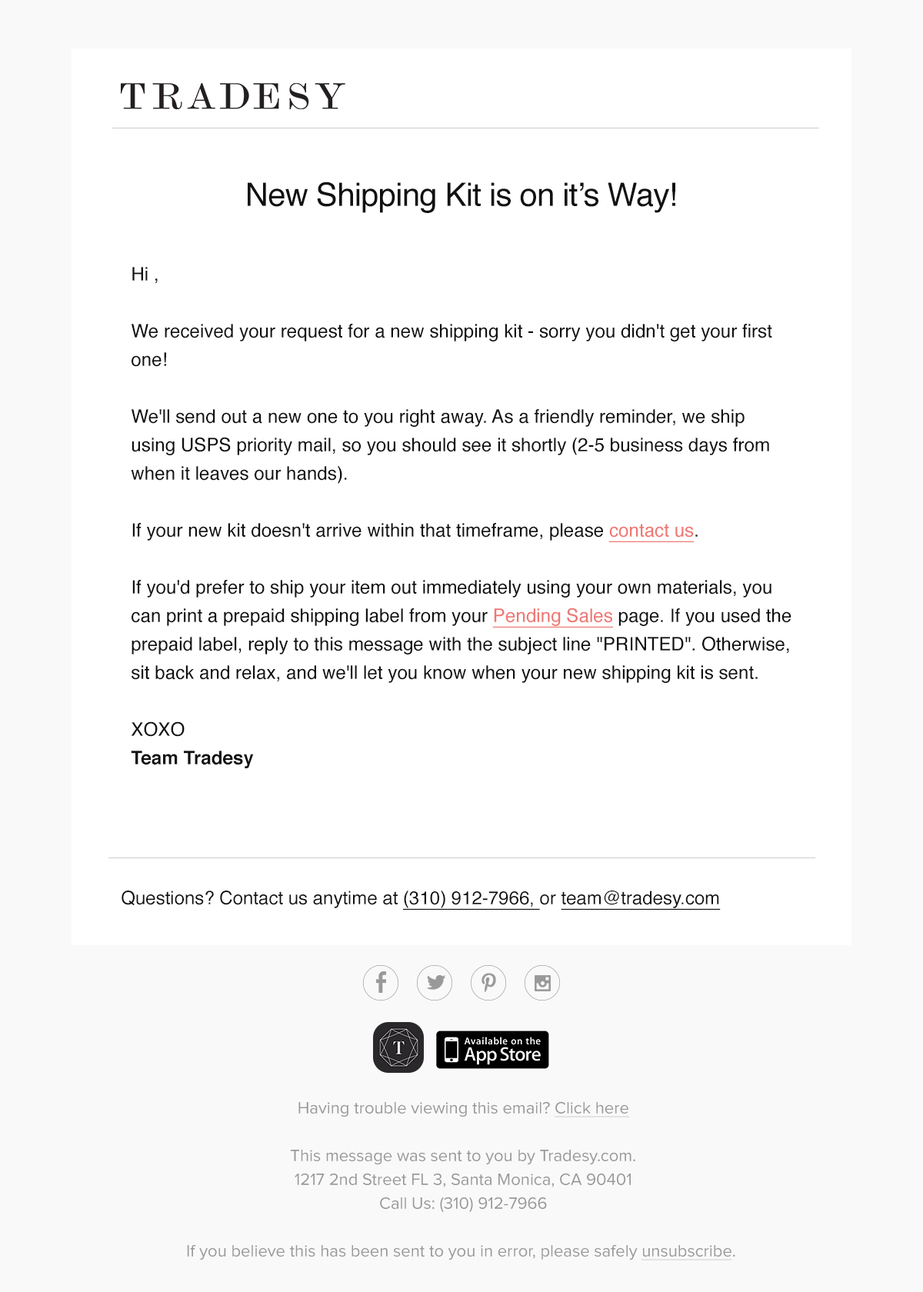
<style>
.page{position:relative;width:923px;height:1292px;background:#ffffff}
.page>*{position:absolute;margin:0}
.t1{font:32.3px "Helvetica";letter-spacing:-0.02em;color:#111111}
.t2{font:18.6px/28.5px "Helvetica";color:#111111}
.t3{font:18.6px/28.5px "Helvetica";color:#ee7873;text-decoration:underline}
.t4{font:18.6px/28.5px "Helvetica-Bold";color:#111111}
.t5{font:18.5px "Helvetica";color:#111111}
.t6{font:18.5px "Helvetica";color:#111111;text-decoration:underline}
.t7{font:16.9px/23.8px "ProximaNova-Regular";color:#999999}
.t8{font:16.9px/23.8px "ProximaNova-Regular";color:#999999;text-decoration:underline}
</style>
<div class="page">
<p class="t1" style="left:248px;top:182px;width:427px;height:31px">New Shipping Kit is on it’s Way!</p>
<p class="t2" style="left:131px;top:267px;width:660px;height:501px">Hi ,<br><br>We received your request for a new shipping kit - sorry you didn't get your first one!<br><br>We'll send out a new one to you right away. As a friendly reminder, we ship using USPS priority mail, so you should see it shortly (2-5 business days from when it leaves our hands).<br><br>If your new kit doesn't arrive within that timeframe, please <span class="t3">contact us</span>.<br><br>If you'd prefer to ship your item out immediately using your own materials, you can print a prepaid shipping label from your <span class="t3">Pending Sales</span> page. If you used the prepaid label, reply to this message with the subject line "PRINTED". Otherwise, sit back and relax, and we'll let you know when your new shipping kit is sent.<br><br>XOXO<br><span class="t4">Team Tradesy</span></p>
<p class="t5" style="left:122px;top:891px;width:599px;height:19px">Questions? Contact us anytime at <span class="t6">(310) 912-7966, </span>or <span class="t6">team@tradesy.com</span></p>
<p class="t7" style="left:187px;top:1101px;width:548px;height:160px;text-align:center">Having trouble viewing this email? <span class="t8">Click here<br></span><br>This message was sent to you by Tradesy.com.<br>1217 2nd Street FL 3, Santa Monica, CA 90401<br>Call Us: (310) 912-7966<br><br>If you believe this has been sent to you in error, please safely <span class="t8">unsubscribe</span>.</p>
</div>
